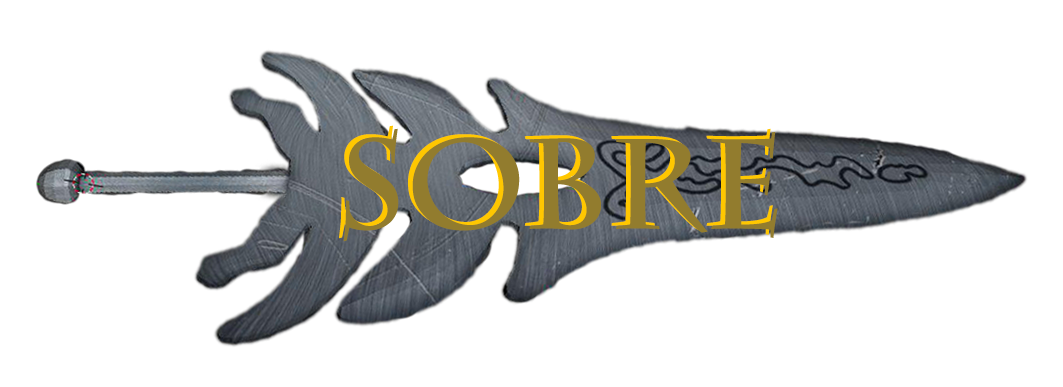
<style>
.page{position:relative;width:1063px;height:387px;background:#ffffff}
.page>*{position:absolute;margin:0}
.t1{font:127.1px "CharlemagneStd-Bold"}
.t2{font:127.1px "CharlemagneStd-Bold";color:#927c2e}
</style>
<div class="page">
<p class="t1" style="left:339px;top:125px;width:434px;height:114px">sobre</p>
<p class="t2" style="left:343px;top:128px;width:435px;height:114px">Sobre</p>
</div>
